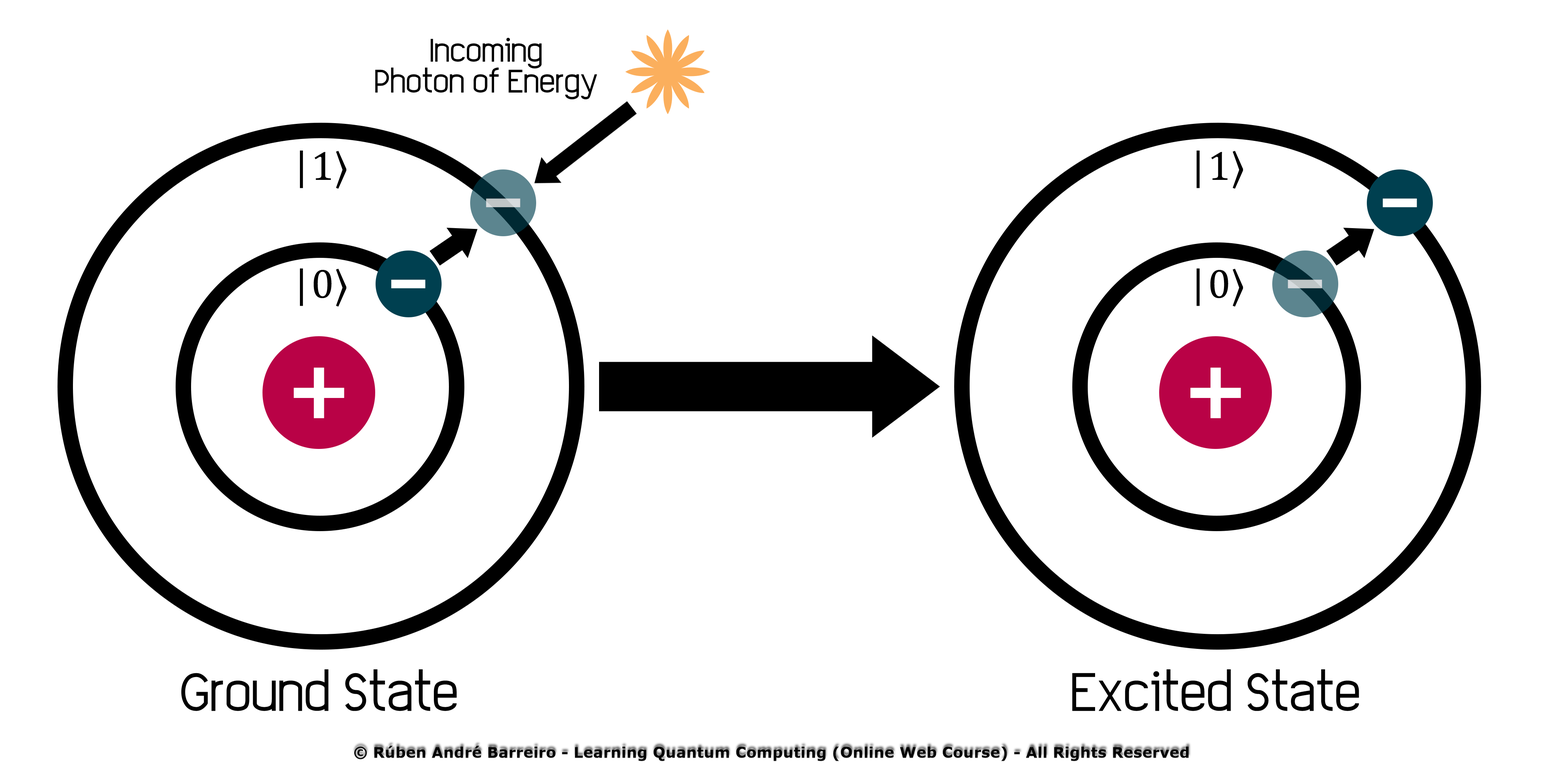
<style>
.page{position:relative;width:1544px;height:772px;background:#ffffff}
.page>*{position:absolute;margin:0}
.t1{font:23.2px/30.9px "EleganTech";color:#000000}
.t2{font:41.3px "Cambria";color:#000000}
.t3{font:41.3px "SitkaSmall-Italic";color:#000000}
.t4{font:86.6px "EleganTech"}
.t5{font:86.6px "EleganTech";color:#ffffff}
.t6{font:86.6px "EleganTech";color:#bfc5c6}
.t7{font:103.1px "EleganTech";color:#ffffff}
.t8{font:38.6px "EleganTech";color:#000000}
</style>
<div class="page">
<p class="t1" style="left:375px;top:38px;width:222px;height:62px;text-align:center">Incoming<br>Photon of Energy</p>
<p class="t2" style="left:300px;top:151px;width:47px;height:38px"><span class="t3">|</span>1⟩</p>
<p class="t2" style="left:1197px;top:151px;width:47px;height:38px"><span class="t3">|</span>1⟩</p>
<p class="t4" style="left:486px;top:198px;width:34px;height:9px">-</p>
<p class="t5" style="left:1383px;top:198px;width:34px;height:9px">-</p>
<p class="t2" style="left:300px;top:268px;width:47px;height:39px"><span class="t3">|</span>0⟩</p>
<p class="t2" style="left:1197px;top:268px;width:47px;height:39px"><span class="t3">|</span>0⟩</p>
<p class="t5" style="left:391px;top:280px;width:34px;height:8px">-</p>
<p class="t6" style="left:1288px;top:280px;width:34px;height:8px">-</p>
<p class="t7" style="left:294px;top:368px;width:50px;height:51px">+</p>
<p class="t7" style="left:1191px;top:368px;width:50px;height:51px">+</p>
<p class="t8" style="left:181px;top:669px;width:276px;height:42px">Ground State</p>
<p class="t8" style="left:1073px;top:669px;width:286px;height:42px">Excited State</p>
</div>
